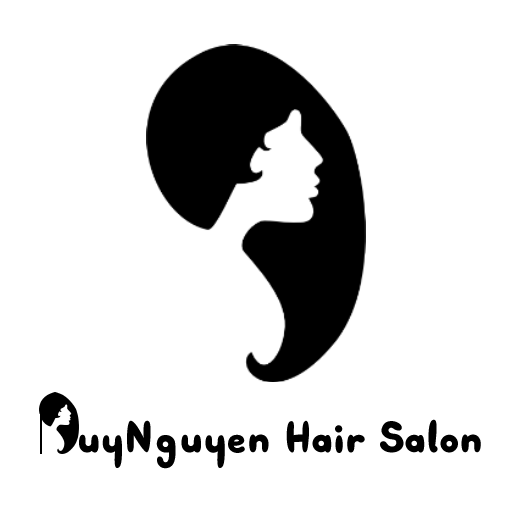
<style>
.page{position:relative;width:512px;height:512px;background:#ffffff}
.page>*{position:absolute;margin:0}
.t1{font:60.7px "SVN-Bublont";color:#000000}
</style>
<div class="page">
<p class="t1" style="left:79px;top:419px;width:402px;height:50px">uyNguyen Hair Salon</p>
</div>
